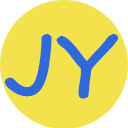
<style>
.page{position:relative;width:128px;height:128px;background:#f4e24c}
.page>*{position:absolute;margin:0}
.t1{font:84.3px "SegoePrint-Bold";color:#2e6ade}
</style>
<div class="page">
<p class="t1" style="left:4px;top:34px;width:115px;height:65px">JY</p>
</div>
